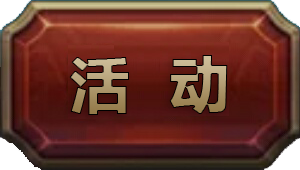
<style>
.page{position:relative;width:300px;height:170px}
.page>*{position:absolute;margin:0}
.t1{font:60px "MicrosoftYaHei-Bold";font-weight:bold}
</style>
<div class="page">
<p class="t1" style="left:69px;top:55px;width:159px;height:60px">活  动</p>
</div>
